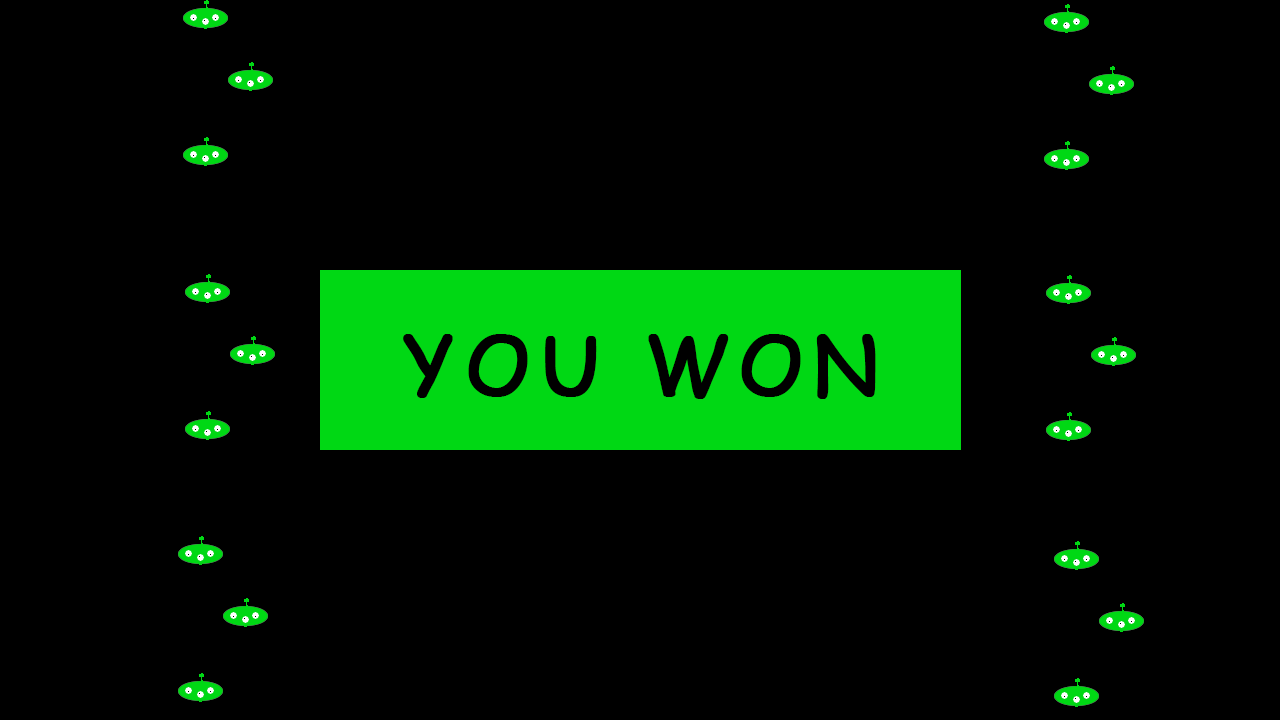
<style>
.page{position:relative;width:1280px;height:720px;background:#000000}
.page>*{position:absolute;margin:0}
.t1{font:81px "ComicSansMS";letter-spacing:0.1em;color:#000000;font-weight:bold}
</style>
<div class="page">
<p class="t1" style="left:403px;top:334px;width:473px;height:65px">YOU WON</p>
</div>
